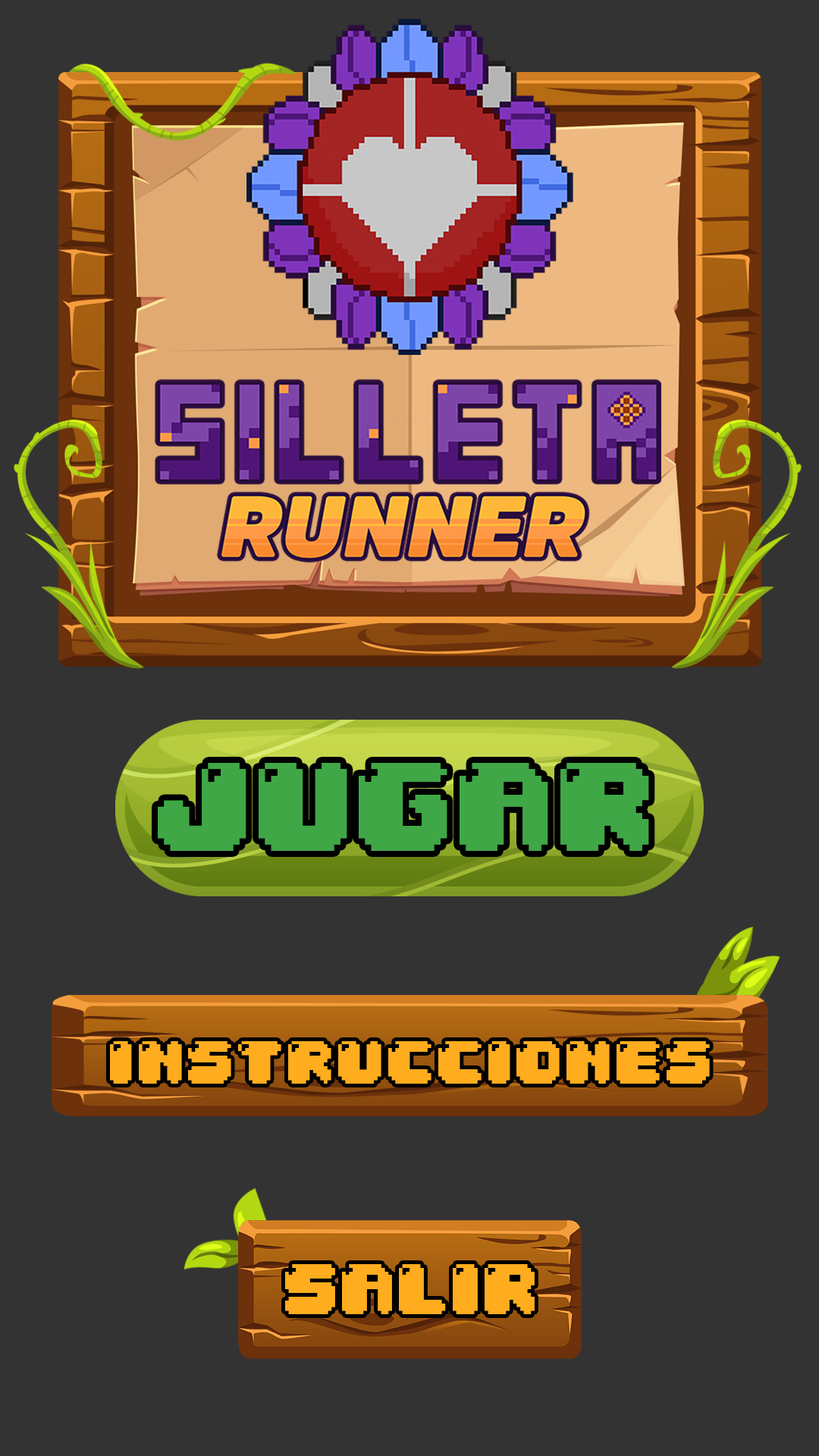
<style>
.page{position:relative;width:819px;height:1456px;background:#333333}
.page>*{position:absolute;margin:0}
.t1{font:107px "04b30";color:#40a747}
.t2{font:60.4px "04b30";color:#ffad1e}
.t3{font:60.5px "04b30";color:#ffad1e}
</style>
<div class="page">
<p class="t1" style="left:158px;top:763px;width:491px;height:88px">JUGAR</p>
<p class="t2" style="left:110px;top:1041px;width:600px;height:43px">instrucciones</p>
<p class="t3" style="left:285px;top:1264px;width:250px;height:50px">SALIR</p>
</div>
